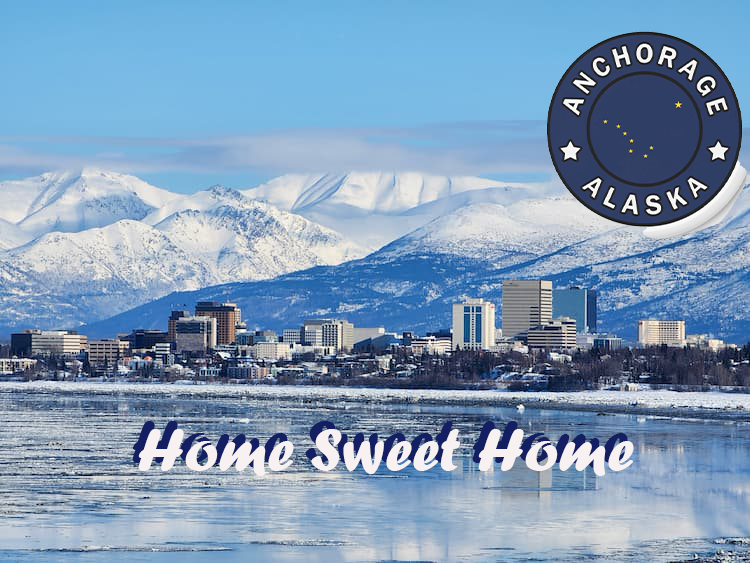
<style>
.page{position:relative;width:750px;height:563px}
.page>*{position:absolute;margin:0}
.t1{font:62.9px "ForteMT";color:#f7f1f1}
</style>
<div class="page">
<p class="t1" style="left:138px;top:429px;width:496px;height:47px">Home Sweet Home</p>
</div>
